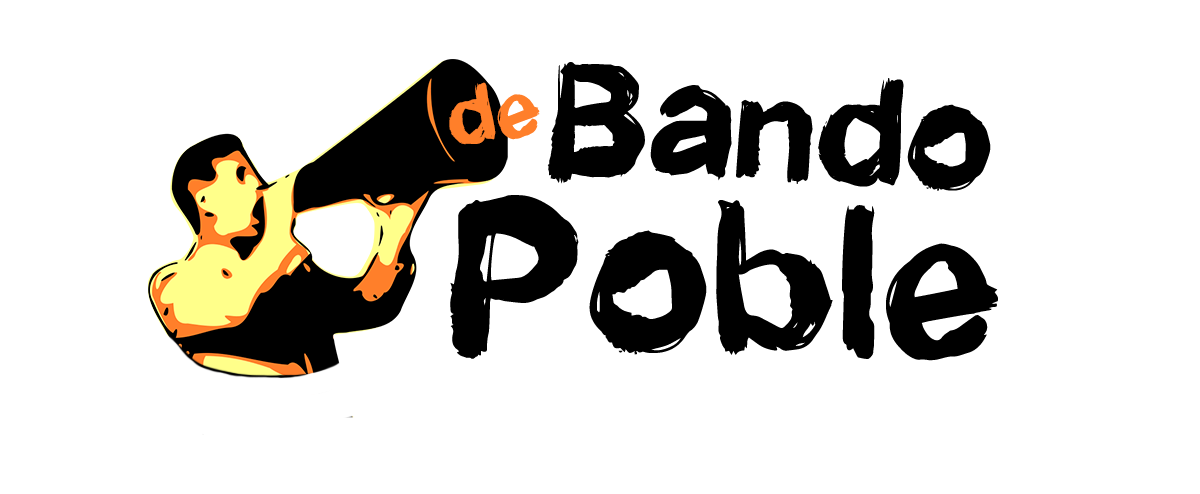
<style>
.page{position:relative;width:1200px;height:494px;background:#ffffff}
.page>*{position:absolute;margin:0}
.t1{font:133px "NewroticRegular";color:#000000}
.t2{font:72px "NewroticRegular";color:#ff7f2a}
.t3{font:190px "NewroticRegular";color:#000000}
</style>
<div class="page">
<p class="t1" style="left:547px;top:62px;width:444px;height:129px;rotate:4deg">Bando</p>
<p class="t2" style="left:449px;top:82px;width:91px;height:63px;rotate:-10deg">de</p>
<p class="t3" style="left:450px;top:195px;width:548px;height:166px">Poble</p>
</div>
